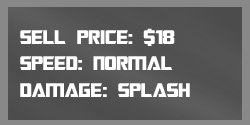
<style>
.page{position:relative;width:250px;height:125px}
.page>*{position:absolute;margin:0}
.t1{font:22px "TransformersMovie";color:#ffffff}
.t2{font:22px "TransformersMovie";letter-spacing:0.02em;color:#ffffff}
</style>
<div class="page">
<p class="t1" style="left:20px;top:28px;width:170px;height:69px">sell p<span class="t2">ri</span>ce: $18<br>spee<span class="t2">d</span>: normal<br>dama<span class="t2">ge</span>: splash</p>
</div>
